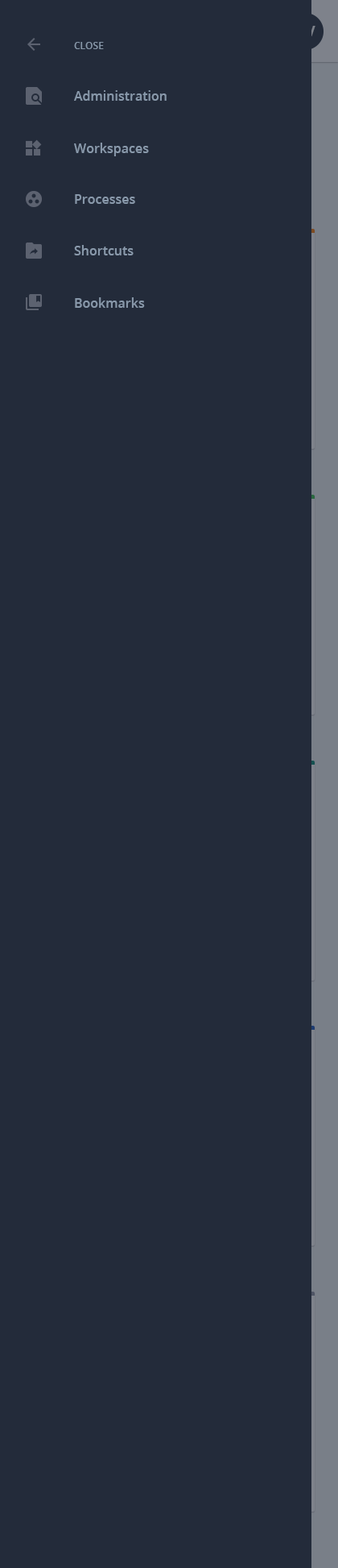
<style>
.page{position:relative;width:338px;height:1568px;background:#232b3a}
.page>*{position:absolute;margin:0}
.t1{font:9.7px "OpenSans-Semibold";color:#8898aa;text-transform:uppercase}
.t2{font:12.9px "OpenSans-Semibold";color:#8898aa}
</style>
<div class="page">
<p class="t1" style="left:74px;top:42px;width:30px;height:7px">close</p>
<p class="t2" style="left:74px;top:90px;width:93px;height:11px">Administration</p>
<p class="t2" style="left:74px;top:143px;width:75px;height:13px">Workspaces</p>
<p class="t2" style="left:75px;top:194px;width:60px;height:10px">Processes</p>
<p class="t2" style="left:74px;top:245px;width:60px;height:10px">Shortcuts</p>
<p class="t2" style="left:75px;top:297px;width:70px;height:11px">Bookmarks</p>
</div>
